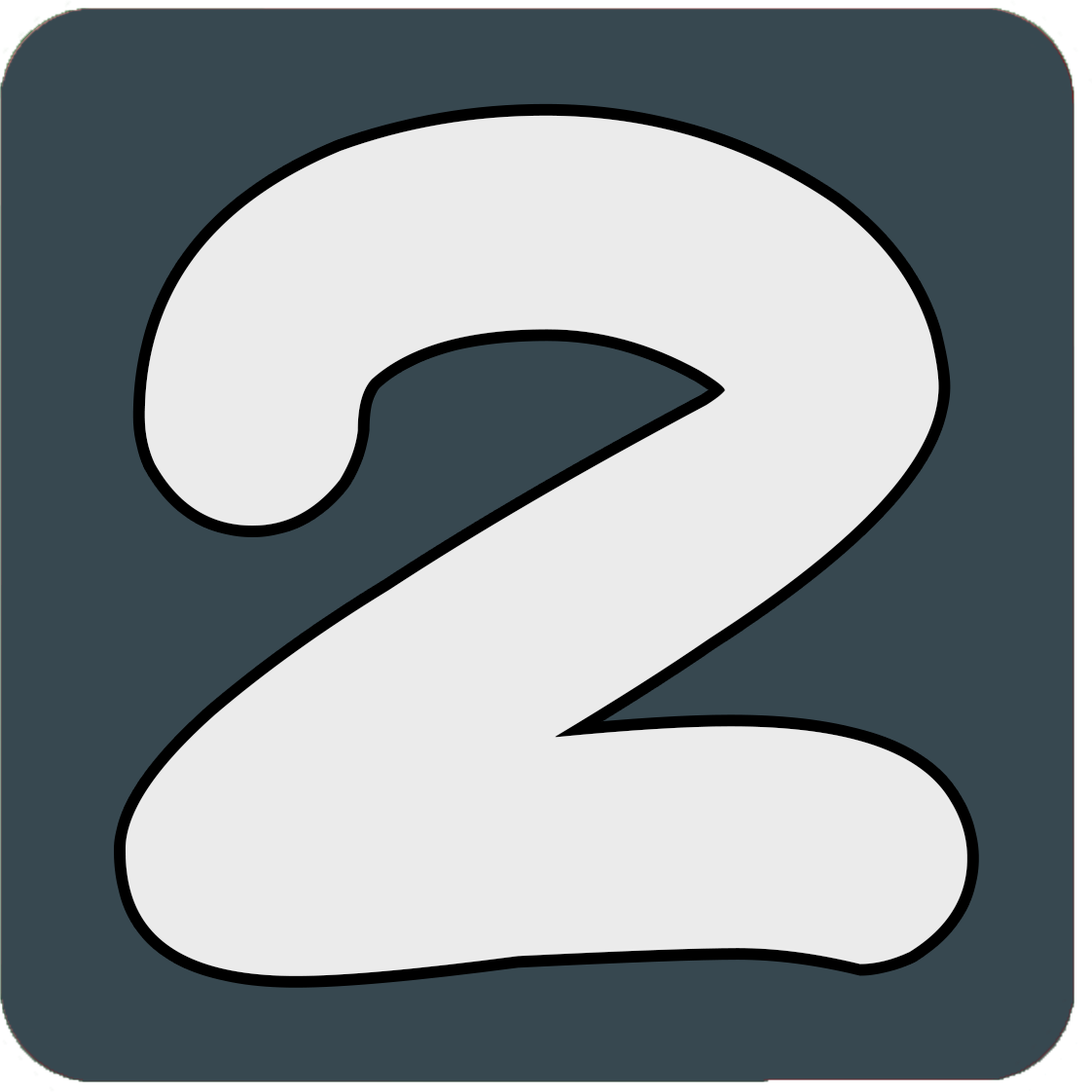
<style>
.page{position:relative;width:1092px;height:1092px;background:#374850}
.page>*{position:absolute;margin:0}
.t1{font:1362.5px "CARTOONIC";color:#ebebeb}
</style>
<div class="page">
<p class="t1" style="left:126px;top:115px;width:841px;height:861px">2</p>
</div>
